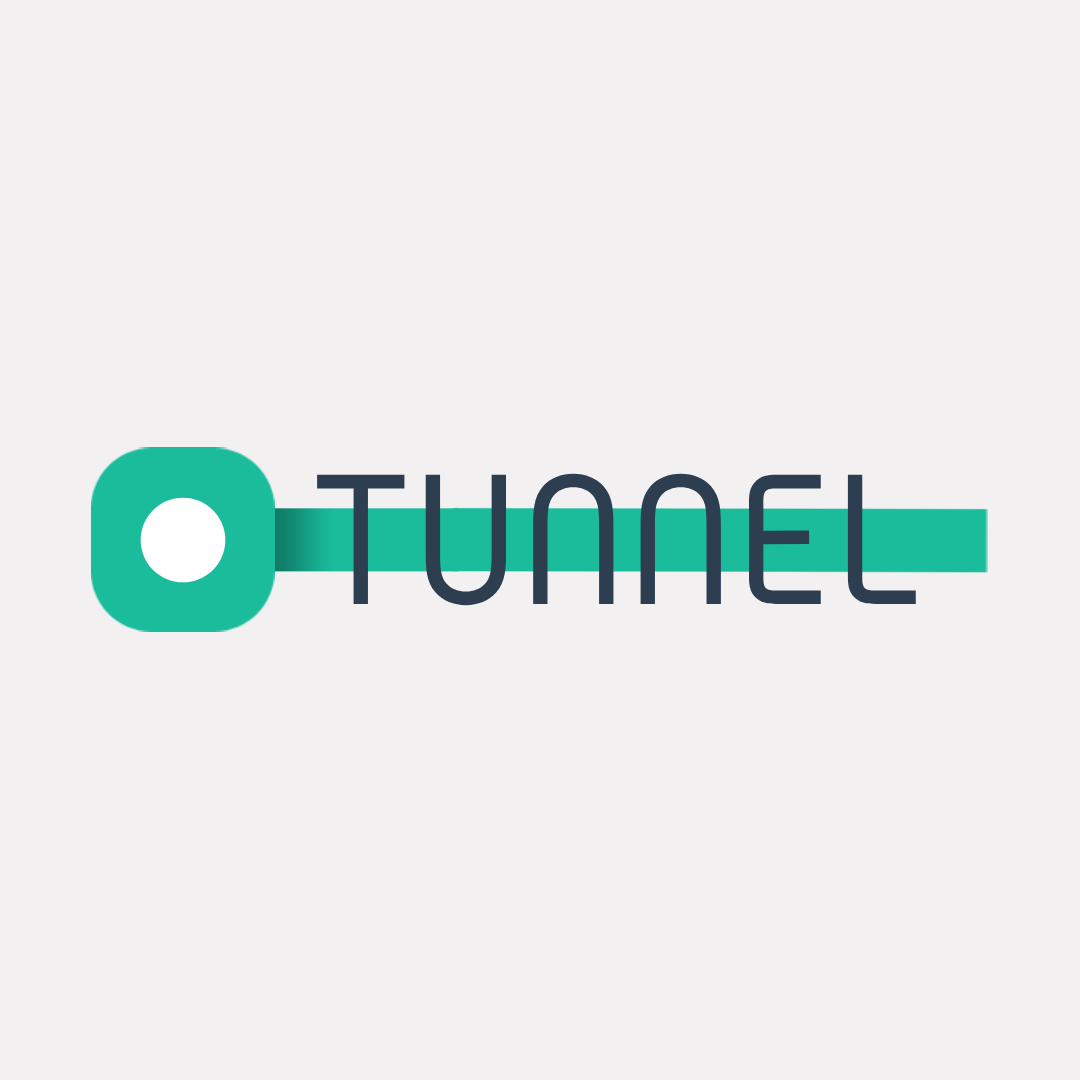
<style>
.page{position:relative;width:1080px;height:1080px;background:#f2f0f1}
.page>*{position:absolute;margin:0}
.t1{font:193.9px "Gidolinya-Regular";color:#2c3e50}
</style>
<div class="page">
<p class="t1" style="left:317px;top:473px;width:599px;height:133px">TUNNEL</p>
</div>
